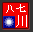
<style>
.page{position:relative;width:33px;height:32px;background:#f20000}
.page>*{position:absolute;margin:0}
.t1{font:10.4px "SimSun";color:#ffffff}
.t2{font:11.7px "SimSun";color:#ffffff}
</style>
<div class="page">
<p class="t1" style="left:6px;top:4px;width:20px;height:9px">八七</p>
<p class="t2" style="left:16px;top:15px;width:11px;height:12px">川</p>
</div>
